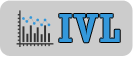
<style>
.page{position:relative;width:137px;height:58px;background:#cccccc}
.page>*{position:absolute;margin:0}
.t1{font:38px "Rockwell-Condensed";color:#3498db;scale:1.5 1}
</style>
<div class="page">
<p class="t1" style="left:59px;top:14px;width:61px;height:29px">IVL</p>
</div>
